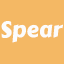
<style>
.page{position:relative;width:64px;height:64px;background:#f4b864}
.page>*{position:absolute;margin:0}
.t1{font:22.3px "CarterOne";color:#fcfcfc}
</style>
<div class="page">
<p class="t1" style="left:1px;top:21px;width:62px;height:22px">Spear</p>
</div>
